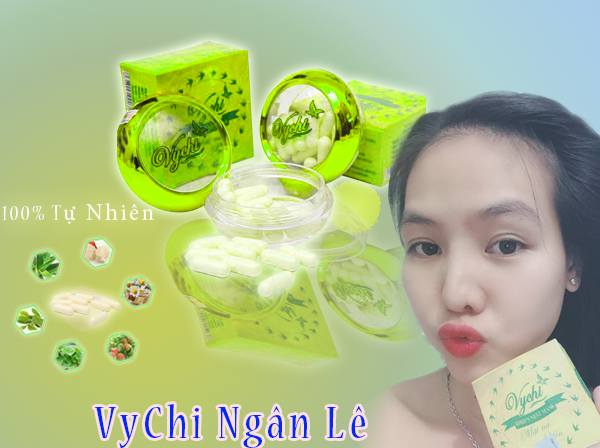
<style>
.page{position:relative;width:600px;height:448px}
.page>*{position:absolute;margin:0}
.t1{font:23.3px "MinionPro-Regular";letter-spacing:0.1em;color:#faf9f8}
.t2{font:23.3px "NuevaStd-Cond";letter-spacing:0.1em;color:#faf9f8}
.t3{font:50px "NuevaStd-Cond";letter-spacing:0.1em;color:#0029f8}
</style>
<div class="page">
<p class="t1" style="left:2px;top:203px;width:152px;height:21px"><span class="t2">100% T</span>ự Nhiên</p>
<p class="t3" style="left:94px;top:404px;width:271px;height:44px">VyChi Ngân Lê</p>
</div>
